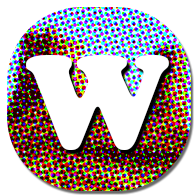
<style>
.page{position:relative;width:196px;height:196px;background:#ffffff}
.page>*{position:absolute;margin:0}
.t1{font:130px "CooperBlackStd";letter-spacing:-0.025em;color:#ffffff}
</style>
<div class="page">
<p class="t1" style="left:26px;top:55px;width:143px;height:95px">W</p>
</div>
